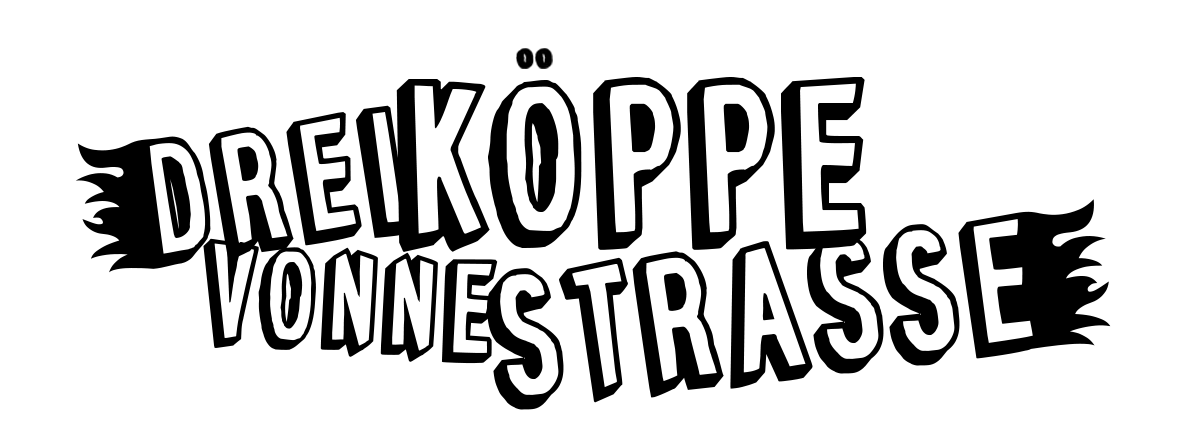
<style>
.page{position:relative;width:1188px;height:432px;background:#ffffff}
.page>*{position:absolute;margin:0}
.t1{font:213.5px "PepperoniPizza";color:#000000}
.t2{font:156.4px "PepperoniPizza";color:#000000}
.t3{font:172.5px "PepperoniPizza";color:#000000}
.t4{font:130.4px "PepperoniPizza";color:#000000}
</style>
<div class="page">
<p class="t1" style="left:396px;top:77px;width:471px;height:175px">koppe</p>
<p class="t2" style="left:75px;top:105px;width:333px;height:168px;rotate:-8deg">Drei</p>
<p class="t3" style="left:487px;top:199px;width:624px;height:211px;rotate:-6deg">strasse</p>
<p class="t4" style="left:203px;top:238px;width:295px;height:126px;rotate:4deg">vonne</p>
</div>
